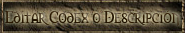
<style>
.page{position:relative;width:185px;height:33px}
.page>*{position:absolute;margin:0}
.t1{font:15.2px "Morpheus"}
</style>
<div class="page">
<p class="t1" style="left:5px;top:10px;width:175px;height:16px">Editar Codex o Descripción</p>
</div>
